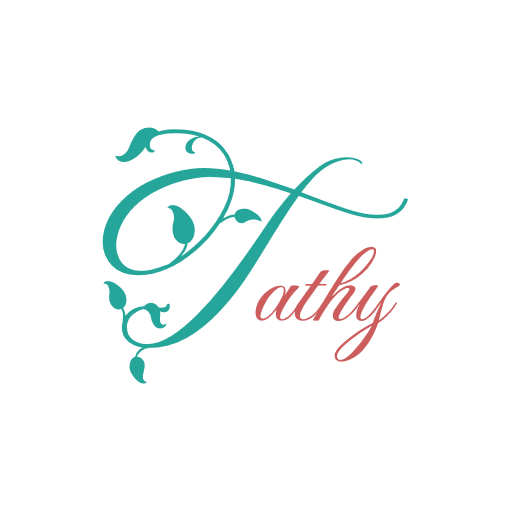
<style>
.page{position:relative;width:512px;height:512px;background:#ffffff}
.page>*{position:absolute;margin:0}
.t1{font:107px "FleurDeLeah-Regular";color:#cd5c5c}
.t2{font:256px "FleurDeLeah-Regular";color:#26a69a}
</style>
<div class="page">
<p class="t1" style="left:102px;top:127px;width:307px;height:257px"><span class="t2">T</span>athy</p>
</div>
